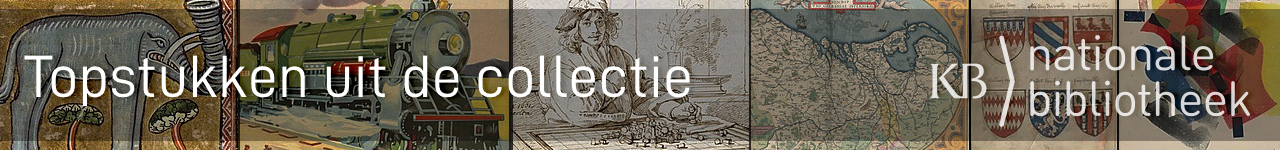
<style>
.page{position:relative;width:1280px;height:150px}
.page>*{position:absolute;margin:0}
.t1{font:60px "D-DIN";color:#ffffff}
</style>
<div class="page">
<p class="t1" style="left:24px;top:55px;width:666px;height:52px">Topstukken uit de collectie</p>
</div>
